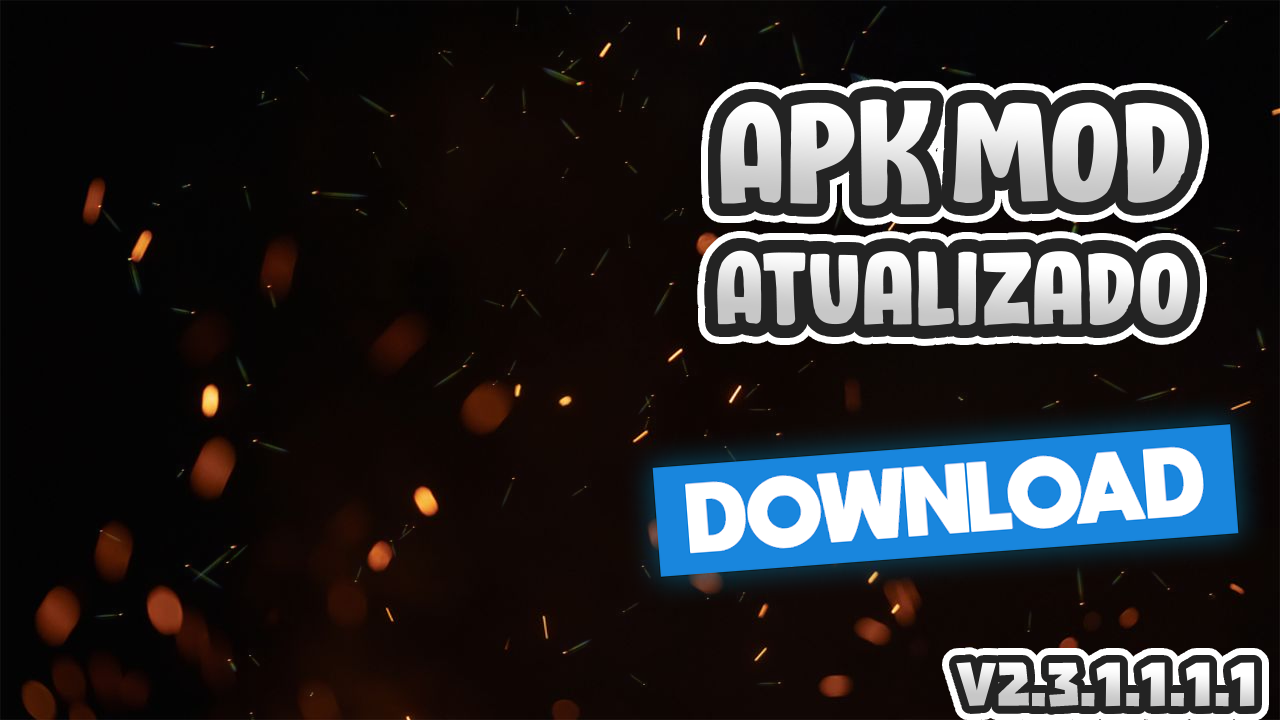
<style>
.page{position:relative;width:1280px;height:720px}
.page>*{position:absolute;margin:0}
.t1{font:150px "BloomerDEMO-Regular"}
.t2{font:108.3px "BloomerDEMO-Regular"}
.t3{font:70px "Troika"}
</style>
<div class="page">
<p class="t1" style="left:720px;top:99px;width:212px;height:107px">Apk</p>
<p class="t1" style="left:953px;top:102px;width:236px;height:101px">Mod</p>
<p class="t2" style="left:717px;top:250px;width:471px;height:76px">Atualizado</p>
<p class="t3" style="left:956px;top:662px;width:299px;height:45px">v2.3.1.1.1.1</p>
</div>
